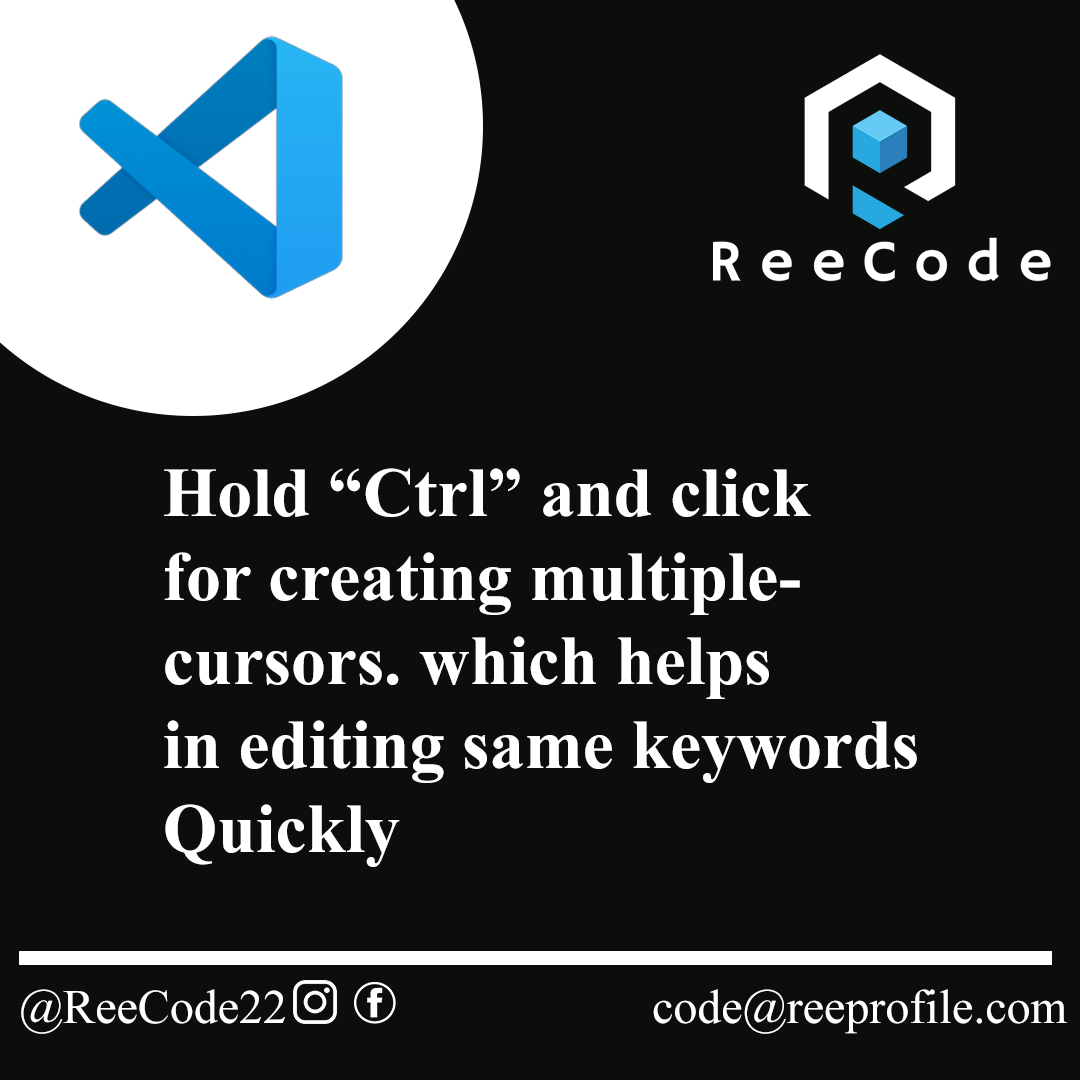
<style>
.page{position:relative;width:1080px;height:1080px;background:#0c0e0c}
.page>*{position:absolute;margin:0}
.t1{font:70px "TimesNewRomanPS-BoldMT";color:#ffffff}
.t2{font:48px "TimesNewRomanPSMT";color:#ffffff}
</style>
<div class="page">
<p class="t1" style="left:164px;top:468px;width:753px;height:399px">Hold “Ctrl” and click<br>for creating multiple-<br>cursors. which helps<br>in editing same keywords<br>Quickly</p>
<p class="t2" style="left:21px;top:989px;width:264px;height:45px">@ReeCode22</p>
<p class="t2" style="left:653px;top:989px;width:414px;height:45px">code@reeprofile.com</p>
</div>
